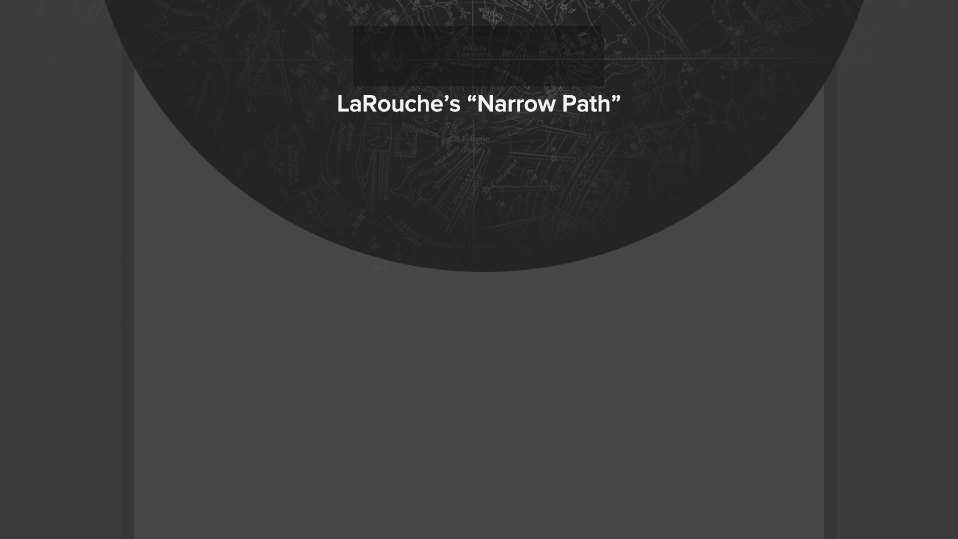
<style>
.page{position:relative;width:958px;height:539px;background:#464646}
.page>*{position:absolute;margin:0}
.t1{font:24px "ProximaNova-Semibold";color:#f5f5f5}
</style>
<div class="page">
<p class="t1" style="left:338px;top:95px;width:282px;height:17px">LaRouche’s “Narrow Path”</p>
</div>
